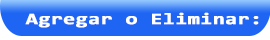
<style>
.page{position:relative;width:270px;height:40px;background:#1e65f3}
.page>*{position:absolute;margin:0}
.t1{font:16px "Consolas-Bold";color:#ffffff;font-weight:bold;scale:1.35 1}
</style>
<div class="page">
<p class="t1" style="left:25px;top:12px;width:234px;height:16px">Agregar o Eliminar:</p>
</div>
